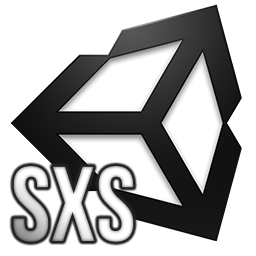
<style>
.page{position:relative;width:256px;height:256px;background:#ffffff}
.page>*{position:absolute;margin:0}
.t1{font:105.8px "BebasNeue"}
</style>
<div class="page">
<p class="t1" style="left:13px;top:166px;width:121px;height:76px">SXS</p>
</div>
